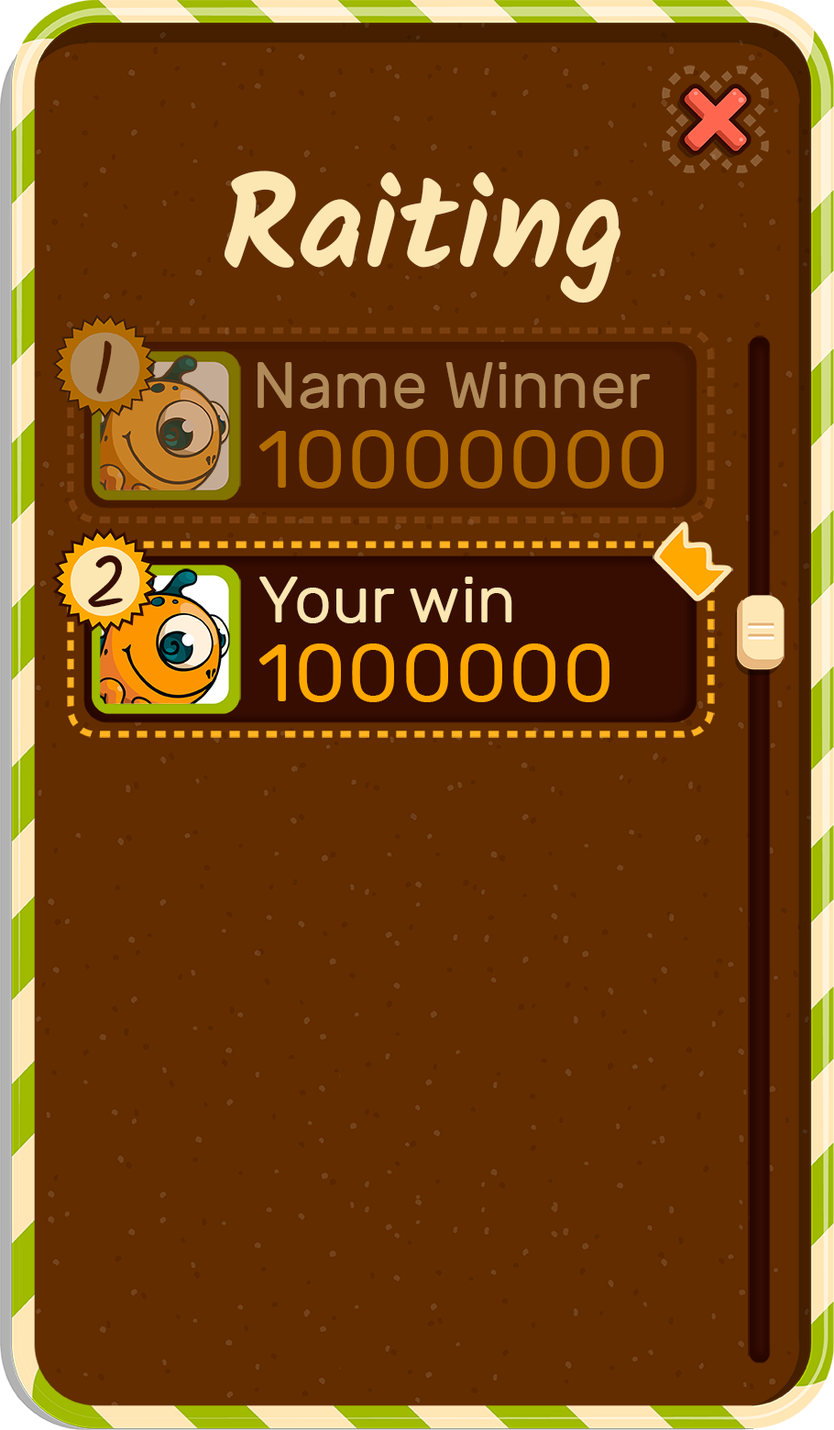
<style>
.page{position:relative;width:834px;height:1430px;background:#632d00}
.page>*{position:absolute;margin:0}
.t1{font:130.9px "Kalam-Bold";color:#fce6b2}
.t2{font:73.6px "Kalam-Regular";color:#4d1d01}
.t3{font:65.4px "Rubik-Regular";color:#b08a59}
.t4{font:81.8px "Rubik-Regular";letter-spacing:0.025em;color:#b16b00}
.t5{font:73.6px "Kalam-Regular";color:#370d02}
.t6{font:65.4px "Rubik-Regular";color:#fce6b2}
.t7{font:81.8px "Rubik-Regular";letter-spacing:0.025em;color:#ffa900}
</style>
<div class="page">
<p class="t1" style="left:224px;top:170px;width:396px;height:133px">Raiting</p>
<p class="t2" style="left:96px;top:340px;width:16px;height:54px">1</p>
<p class="t3" style="left:258px;top:362px;width:392px;height:47px">Name Winner</p>
<p class="t4" style="left:259px;top:430px;width:405px;height:58px">10000000</p>
<p class="t5" style="left:88px;top:554px;width:35px;height:54px">2</p>
<p class="t6" style="left:259px;top:576px;width:253px;height:47px">Your win</p>
<p class="t7" style="left:259px;top:643px;width:350px;height:59px">1000000</p>
</div>
